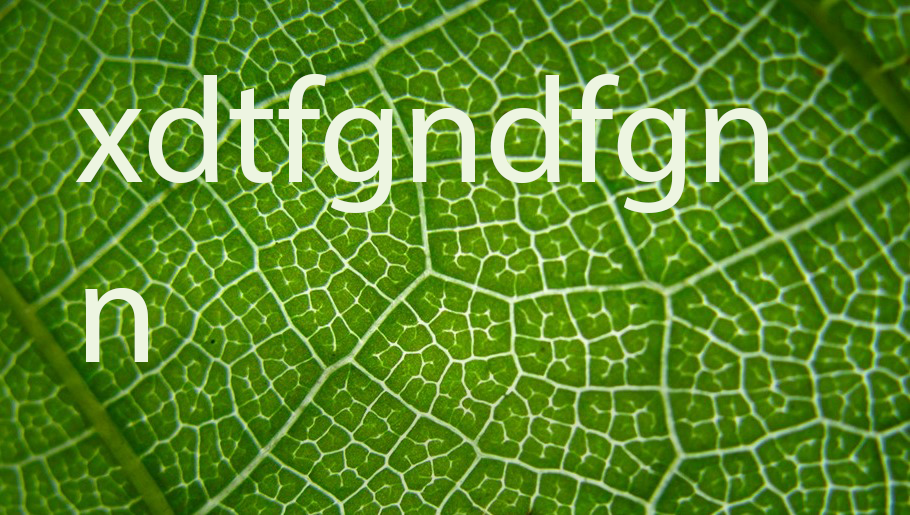
<style>
.page{position:relative;width:910px;height:515px}
.page>*{position:absolute;margin:0}
.t1{font:150px "MyriadPro-Regular";color:#edf5e1}
</style>
<div class="page">
<p class="t1" style="left:76px;top:73px;width:692px;height:289px">xdtfgndfgn n</p>
</div>
